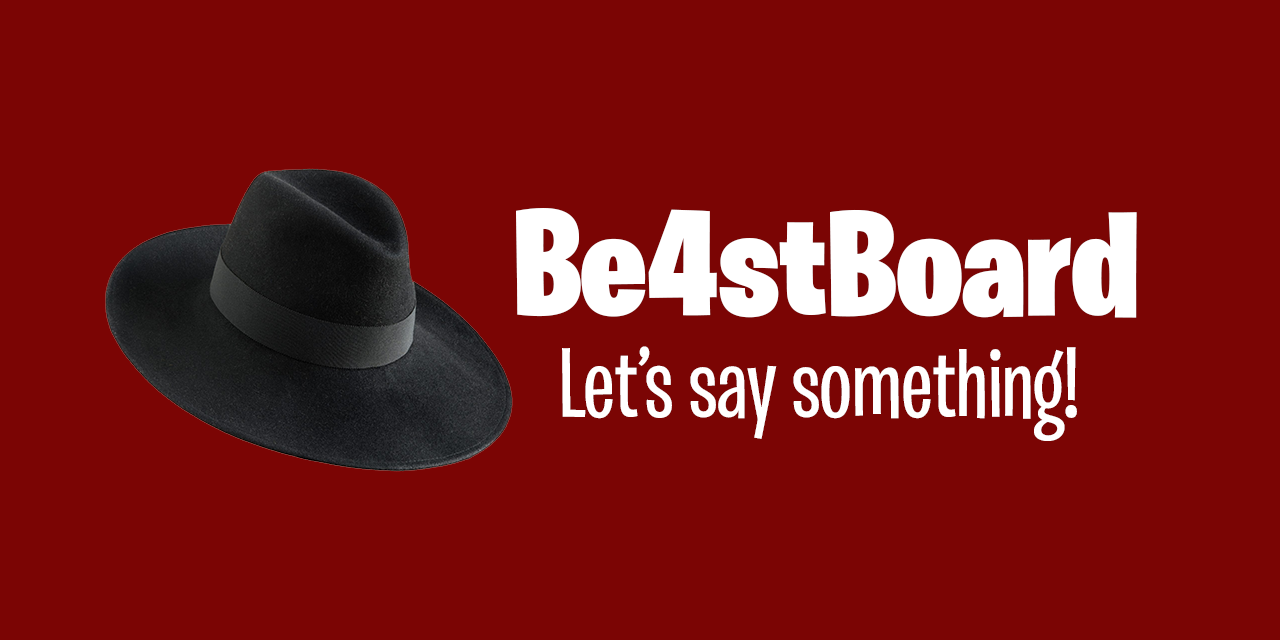
<style>
.page{position:relative;width:1280px;height:640px;background:#7b0504}
.page>*{position:absolute;margin:0}
.t1{font:150px "BurbankBigCondensed-Black";color:#ffffff}
.t2{font:100px "BurbankBigCondensed-Medium";color:#ffffff}
</style>
<div class="page">
<p class="t1" style="left:516px;top:208px;width:621px;height:110px">Be4stBoard</p>
<p class="t2" style="left:562px;top:346px;width:515px;height:95px">Let’s say something!</p>
</div>
